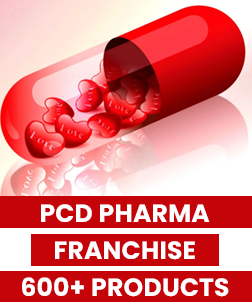
<style>
.page{position:relative;width:252px;height:302px}
.page>*{position:absolute;margin:0}
.t1{font:25px "Poppins-Bold";letter-spacing:0.01em;color:#ffffff}
</style>
<div class="page">
<p class="t1" style="left:41px;top:204px;width:169px;height:18px">PCD PHARMA</p>
<p class="t1" style="left:55px;top:241px;width:140px;height:19px">FRANCHISE</p>
<p class="t1" style="left:22px;top:277px;width:207px;height:20px">600+ PRODUCTS</p>
</div>
